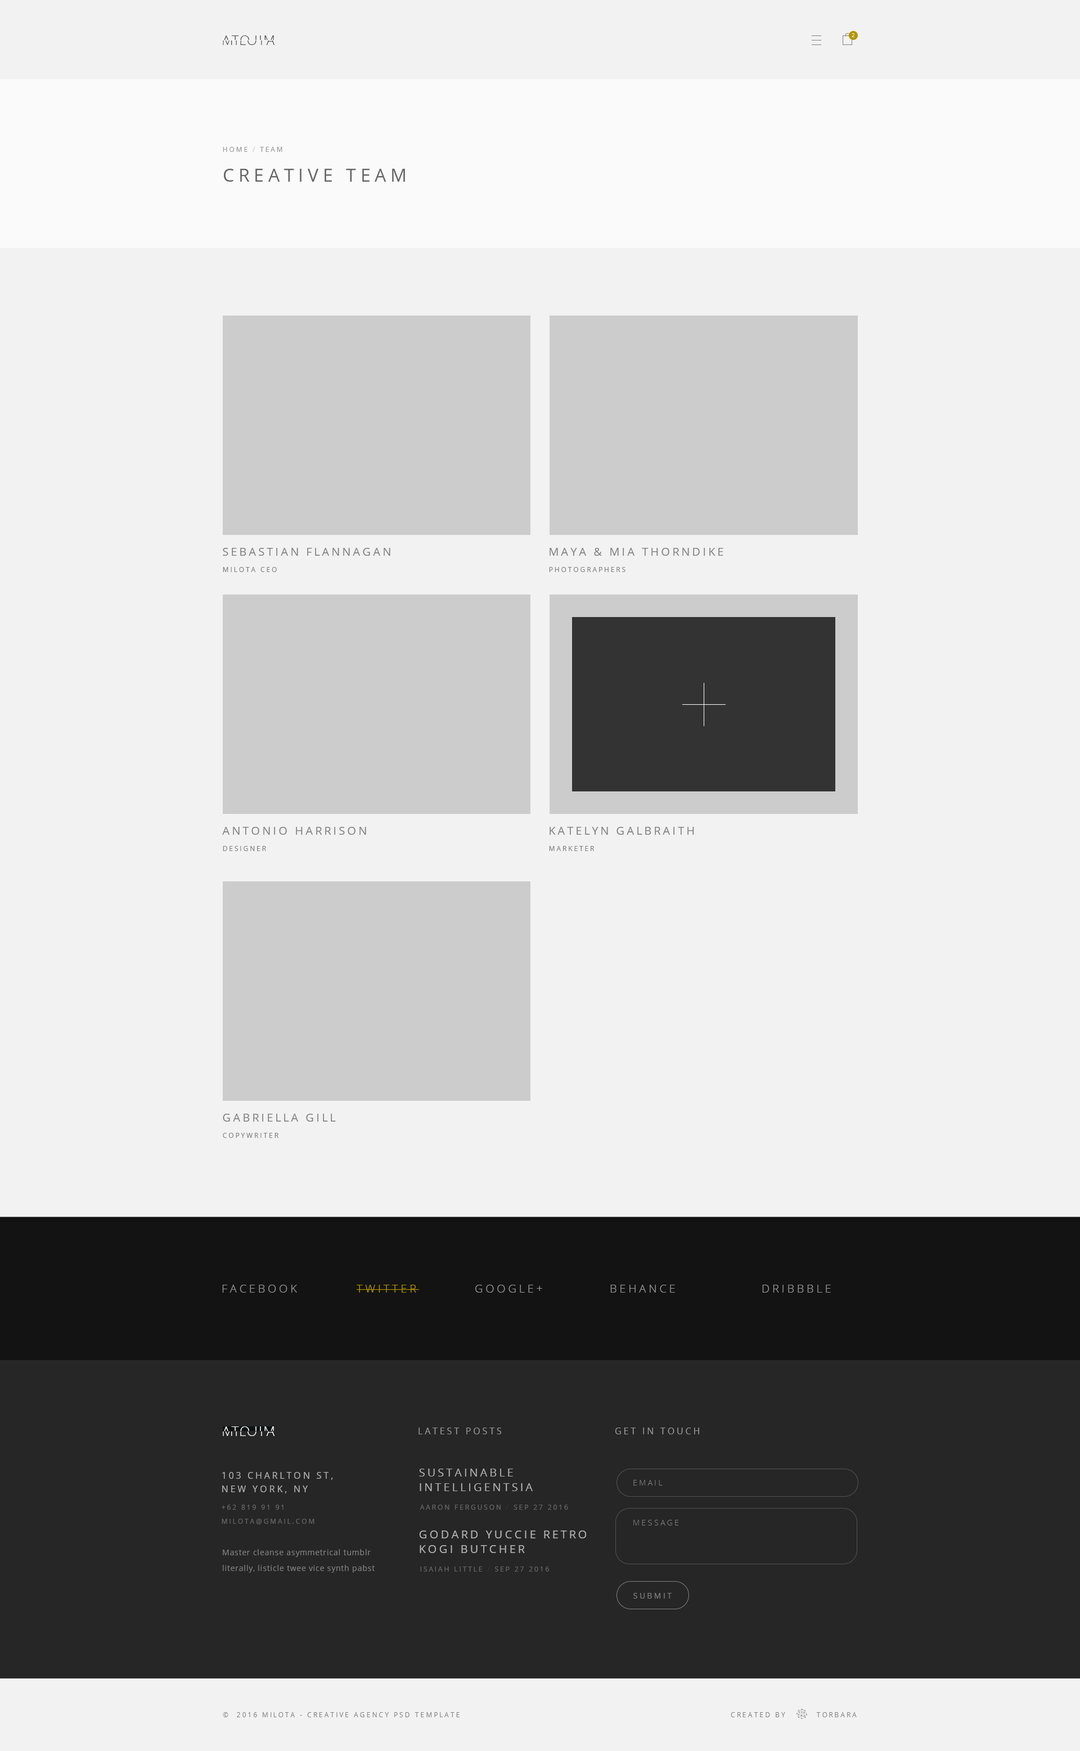
<style>
.page{position:relative;width:1080px;height:1751px;background:#f2f2f2}
.page>*{position:absolute;margin:0}
.t1{font:13.5px "OpenSans-Light";letter-spacing:0.08em;text-transform:uppercase}
.t2{font:5.6px "OpenSans-Light";letter-spacing:0.28em;color:#ffffff;text-transform:uppercase}
.t3{font:6.8px "OpenSans";letter-spacing:0.24em;color:#999999;text-transform:uppercase}
.t4{font:6.8px "OpenSans";letter-spacing:0.24em;color:#cccccc;text-transform:uppercase}
.t5{font:18px "OpenSans";letter-spacing:0.24em;color:#666666;text-transform:uppercase}
.t6{font:11.2px "OpenSans";letter-spacing:0.2em;color:#808080;text-transform:uppercase}
.t7{font:6.8px "OpenSans";letter-spacing:0.24em;color:#808080;text-transform:uppercase}
.t8{font:11.2px "OpenSans-Light";letter-spacing:0.24em;color:#999999;text-transform:uppercase}
.t9{font:11.2px "OpenSans-Light";letter-spacing:0.24em;color:#b39500;text-transform:uppercase}
.t10{font:9px "OpenSans";letter-spacing:0.24em;color:#999999;text-transform:uppercase}
.t11{font:11.2px/14.6px "OpenSans";letter-spacing:0.2em;color:#b3b3b3;text-transform:uppercase}
.t12{font:9px/13.5px "OpenSans";letter-spacing:0.24em;color:#b3b3b3;text-transform:uppercase}
.t13{font:7.9px "OpenSans-Light";letter-spacing:0.24em;color:#808080;text-transform:uppercase}
.t14{font:6.8px "OpenSans";letter-spacing:0.24em;color:#666666;text-transform:uppercase}
.t15{font:6.8px "OpenSans";letter-spacing:0.24em;color:#333333;text-transform:uppercase}
.t16{font:7.9px/15.8px "OpenSans";letter-spacing:0.04em;color:#808080}
.t17{font:7.9px "OpenSans";letter-spacing:0.24em;color:#808080;text-transform:uppercase}
</style>
<div class="page">
<p class="t1" style="left:222px;top:35px;width:52px;height:10px;rotate:180deg">milota</p>
<p class="t1" style="left:223px;top:35px;width:51px;height:10px">milota</p>
<p class="t2" style="left:852px;top:33px;width:2px;height:4px">2</p>
<p class="t3" style="left:223px;top:147px;width:59px;height:5px">home <span class="t4">/</span> team</p>
<p class="t5" style="left:224px;top:169px;width:181px;height:13px">Creative Team</p>
<p class="t6" style="left:223px;top:548px;width:167px;height:8px">Sebastian Flannagan</p>
<p class="t6" style="left:550px;top:548px;width:173px;height:8px">Maya &amp; Mia Thorndike</p>
<p class="t7" style="left:223px;top:567px;width:54px;height:5px">Milota ceo</p>
<p class="t7" style="left:549px;top:567px;width:77px;height:5px">Photographers</p>
<p class="t6" style="left:222px;top:827px;width:144px;height:8px">Antonio Harrison</p>
<p class="t6" style="left:550px;top:827px;width:144px;height:8px">Katelyn Galbraith</p>
<p class="t7" style="left:223px;top:846px;width:43px;height:5px">designer</p>
<p class="t7" style="left:549px;top:846px;width:46px;height:5px">marketer</p>
<p class="t6" style="left:223px;top:1114px;width:113px;height:8px">Gabriella Gill</p>
<p class="t7" style="left:223px;top:1133px;width:55px;height:5px">copywriter</p>
<p class="t8" style="left:222px;top:1285px;width:75px;height:8px">facebook</p>
<p class="t9" style="left:357px;top:1285px;width:62px;height:8px">Twitter</p>
<p class="t8" style="left:475px;top:1285px;width:67px;height:8px">Google+</p>
<p class="t8" style="left:610px;top:1285px;width:65px;height:8px">Behance</p>
<p class="t8" style="left:762px;top:1285px;width:69px;height:8px">dribbble</p>
<p class="t1" style="left:222px;top:1426px;width:52px;height:10px;rotate:180deg">milota</p>
<p class="t1" style="left:223px;top:1426px;width:51px;height:10px">milota</p>
<p class="t10" style="left:418px;top:1428px;width:84px;height:6px">Latest posts</p>
<p class="t10" style="left:615px;top:1428px;width:84px;height:6px">Get in touch</p>
<p class="t11" style="left:419px;top:1469px;width:114px;height:22px">Sustainable intelligentsia butcher</p>
<p class="t12" style="left:222px;top:1472px;width:111px;height:21px">103 Charlton St, <br>New York, NY</p>
<p class="t13" style="left:633px;top:1480px;width:30px;height:6px">Email</p>
<p class="t14" style="left:222px;top:1505px;width:62px;height:5px">+62 819 91 91</p>
<p class="t14" style="left:420px;top:1505px;width:148px;height:5px">Aaron Ferguson <span class="t15">/</span> Sep 27 2016</p>
<p class="t14" style="left:222px;top:1519px;width:92px;height:5px">milota@gmail.com</p>
<p class="t13" style="left:633px;top:1520px;width:45px;height:6px">Message</p>
<p class="t11" style="left:419px;top:1531px;width:167px;height:22px">Godard yuccie retro kogi butcher</p>
<p class="t16" style="left:223px;top:1549px;width:152px;height:24px">Master cleanse asymmetrical tumblr literally, listicle twee vice synth pabst<br> fixie etsy squid.</p>
<p class="t14" style="left:420px;top:1567px;width:129px;height:5px">Isaiah Little <span class="t15">/</span> Sep 27 2016</p>
<p class="t17" style="left:633px;top:1593px;width:39px;height:6px">submit</p>
<p class="t7" style="left:223px;top:1712px;width:237px;height:5px">©  2016 MIlota - Creative agency psd template</p>
<p class="t7" style="left:731px;top:1712px;width:126px;height:5px">Created by         Torbara</p>
</div>
